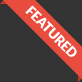
<style>
.page{position:relative;width:82px;height:82px;background:#333333}
.page>*{position:absolute;margin:0}
.t1{font:13px "Lato-Black";color:#ffffff;text-transform:uppercase}
</style>
<div class="page">
<p class="t1" style="left:25px;top:5px;width:52px;height:52px;rotate:45deg">FEATURED</p>
</div>
